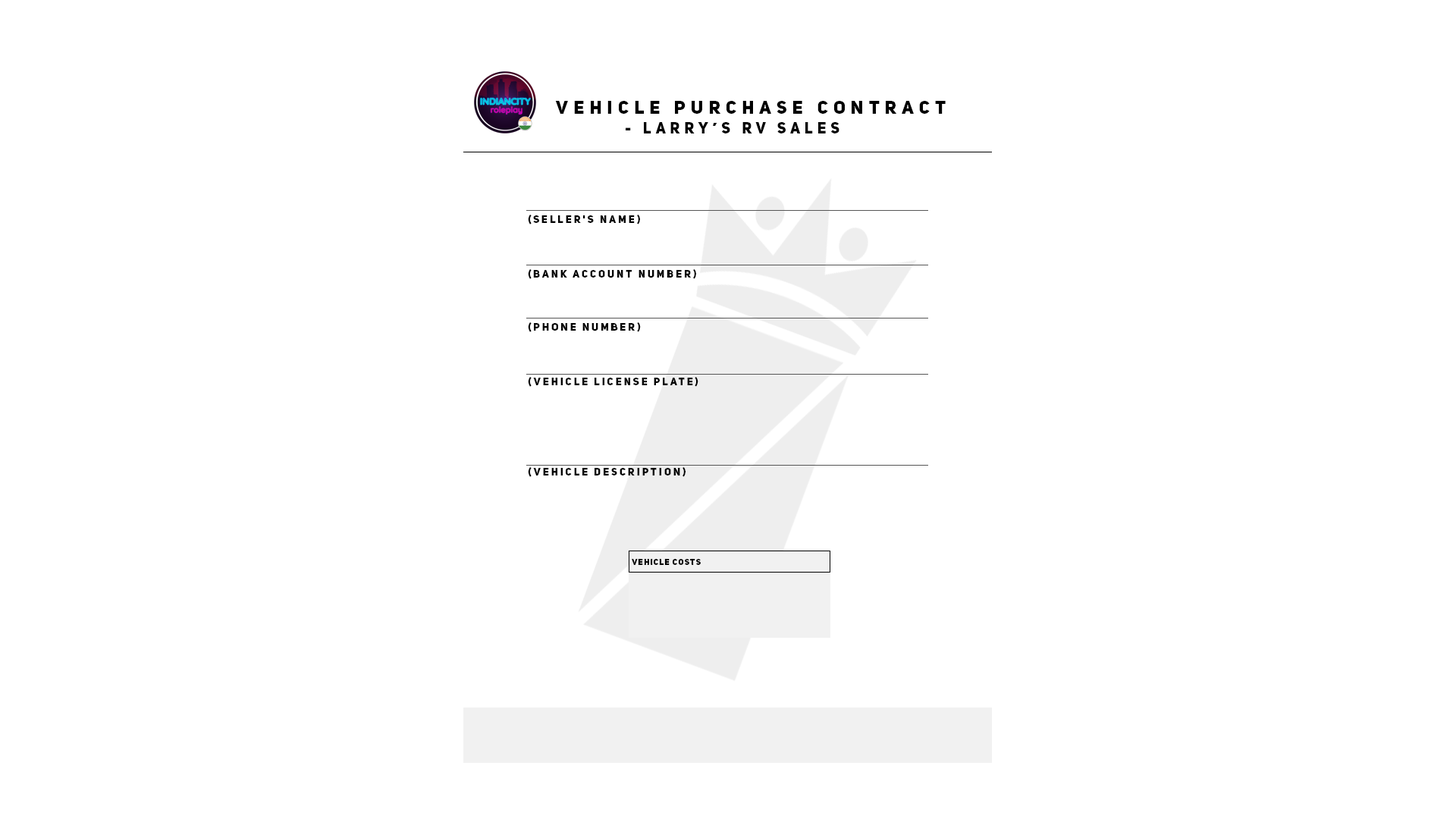
<style>
.page{position:relative;width:1456px;height:819px;background:#ffffff}
.page>*{position:absolute;margin:0}
.t1{font:18.2px "UniSansHeavyCAPS";letter-spacing:0.3em;color:#000000}
.t2{font:15.2px "UniSansHeavyCAPS";letter-spacing:0.3em;color:#000000}
.t3{font:10.6px "UniSansHeavyCAPS";letter-spacing:0.2em;color:#000000}
.t4{font:10.6px "UniSansHeavyCAPS";letter-spacing:0.2em;color:#010101}
.t5{font:8.3px "UniSansHeavyCAPS";letter-spacing:0.1em;color:#000000}
</style>
<div class="page">
<p class="t1" style="left:555px;top:101px;width:391px;height:13px">Vehicle Purchase Contract</p>
<p class="t2" style="left:626px;top:122px;width:213px;height:11px">- Larry’s rv sales</p>
<p class="t3" style="left:528px;top:215px;width:112px;height:9px">(Seller's name)</p>
<p class="t3" style="left:528px;top:269px;width:168px;height:10px">(Bank account number)</p>
<p class="t4" style="left:528px;top:322px;width:113px;height:10px">(Phone number)</p>
<p class="t4" style="left:528px;top:377px;width:170px;height:10px">(Vehicle License Plate)</p>
<p class="t4" style="left:528px;top:467px;width:158px;height:10px">(Vehicle description)</p>
<p class="t5" style="left:632px;top:559px;width:69px;height:6px">vehicle costs</p>
</div>
